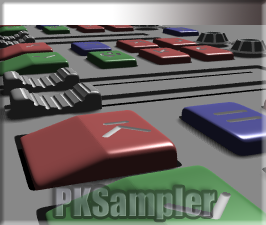
<style>
.page{position:relative;width:266px;height:225px}
.page>*{position:absolute;margin:0}
.t1{font:36px "Impact"}
</style>
<div class="page">
<p class="t1" style="left:55px;top:187px;width:160px;height:33px">PKSampler</p>
</div>
